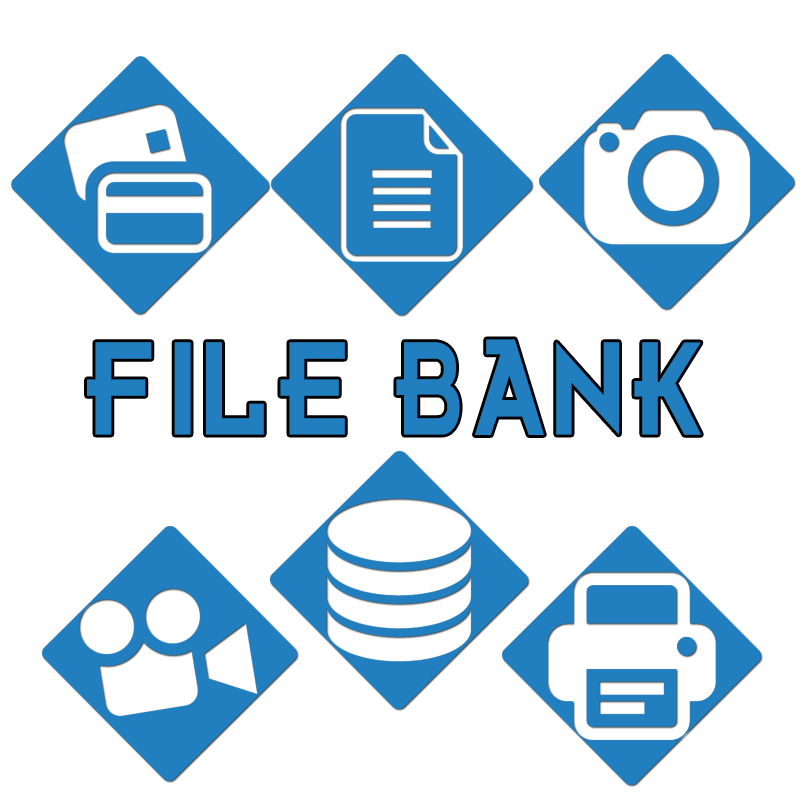
<style>
.page{position:relative;width:810px;height:810px;background:#ffffff}
.page>*{position:absolute;margin:0}
.t1{font:111.1px "Futurama-Bold-Font";letter-spacing:0.1em;color:#217fbf;scale:0.77 1}
</style>
<div class="page">
<p class="t1" style="left:87px;top:339px;width:614px;height:96px">FILE BANK</p>
</div>
